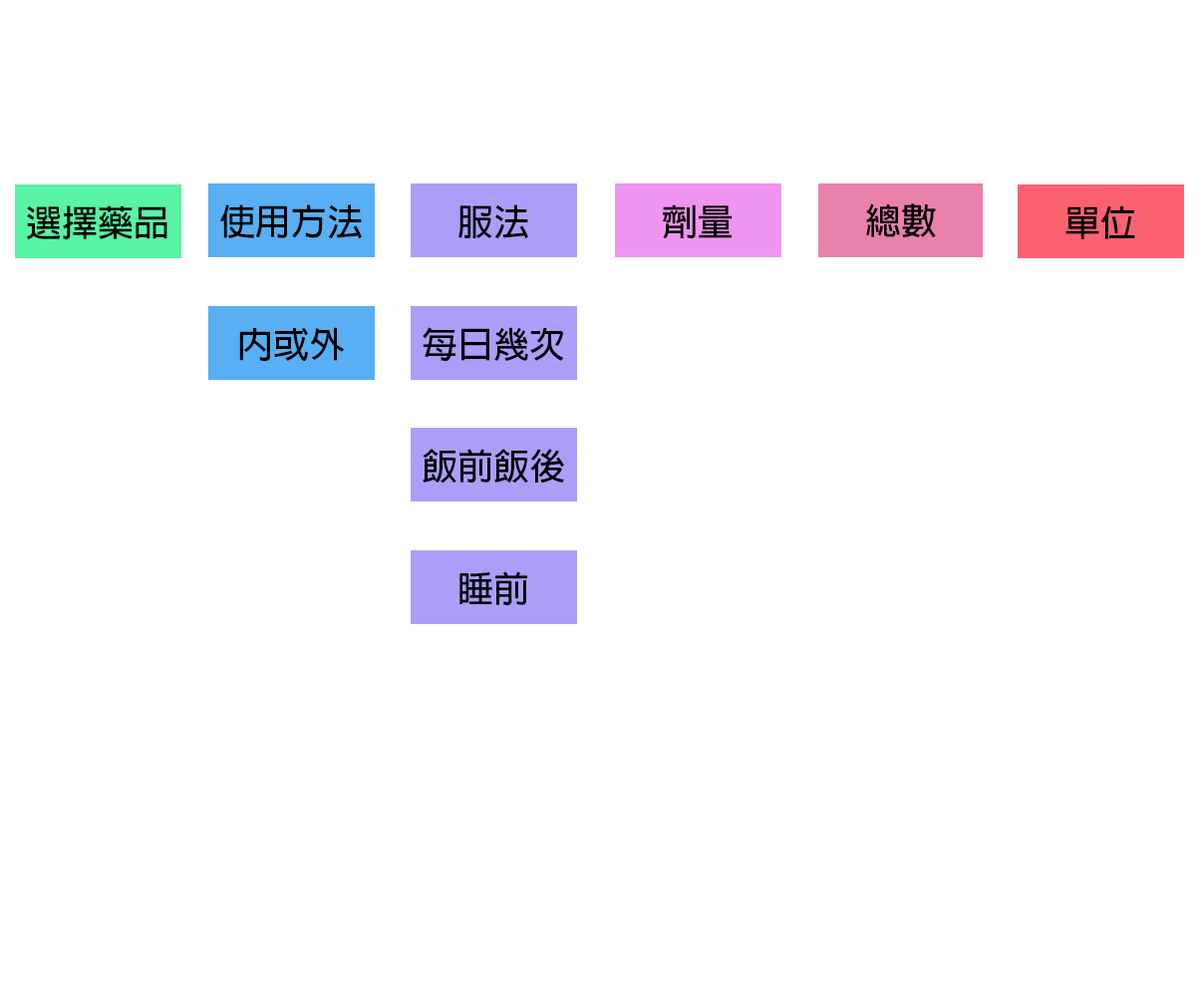
<style>
.page{position:relative;width:1196px;height:997px;background:#ffffff}
.page>*{position:absolute;margin:0}
.t1{font:35.9px "AdobeFanHeitiStd-Bold";color:#000000}
</style>
<div class="page">
<p class="t1" style="left:27px;top:205px;width:140px;height:34px">選擇藥品</p>
<p class="t1" style="left:219px;top:204px;width:143px;height:35px">使用方法</p>
<p class="t1" style="left:459px;top:204px;width:69px;height:35px">服法</p>
<p class="t1" style="left:662px;top:204px;width:71px;height:35px">劑量</p>
<p class="t1" style="left:866px;top:203px;width:70px;height:34px">總數</p>
<p class="t1" style="left:1066px;top:205px;width:69px;height:34px">單位</p>
<p class="t1" style="left:239px;top:327px;width:106px;height:34px">內或外</p>
<p class="t1" style="left:423px;top:327px;width:141px;height:34px">每日幾次</p>
<p class="t1" style="left:423px;top:449px;width:141px;height:34px">飯前飯後</p>
<p class="t1" style="left:460px;top:571px;width:67px;height:34px">睡前</p>
</div>
